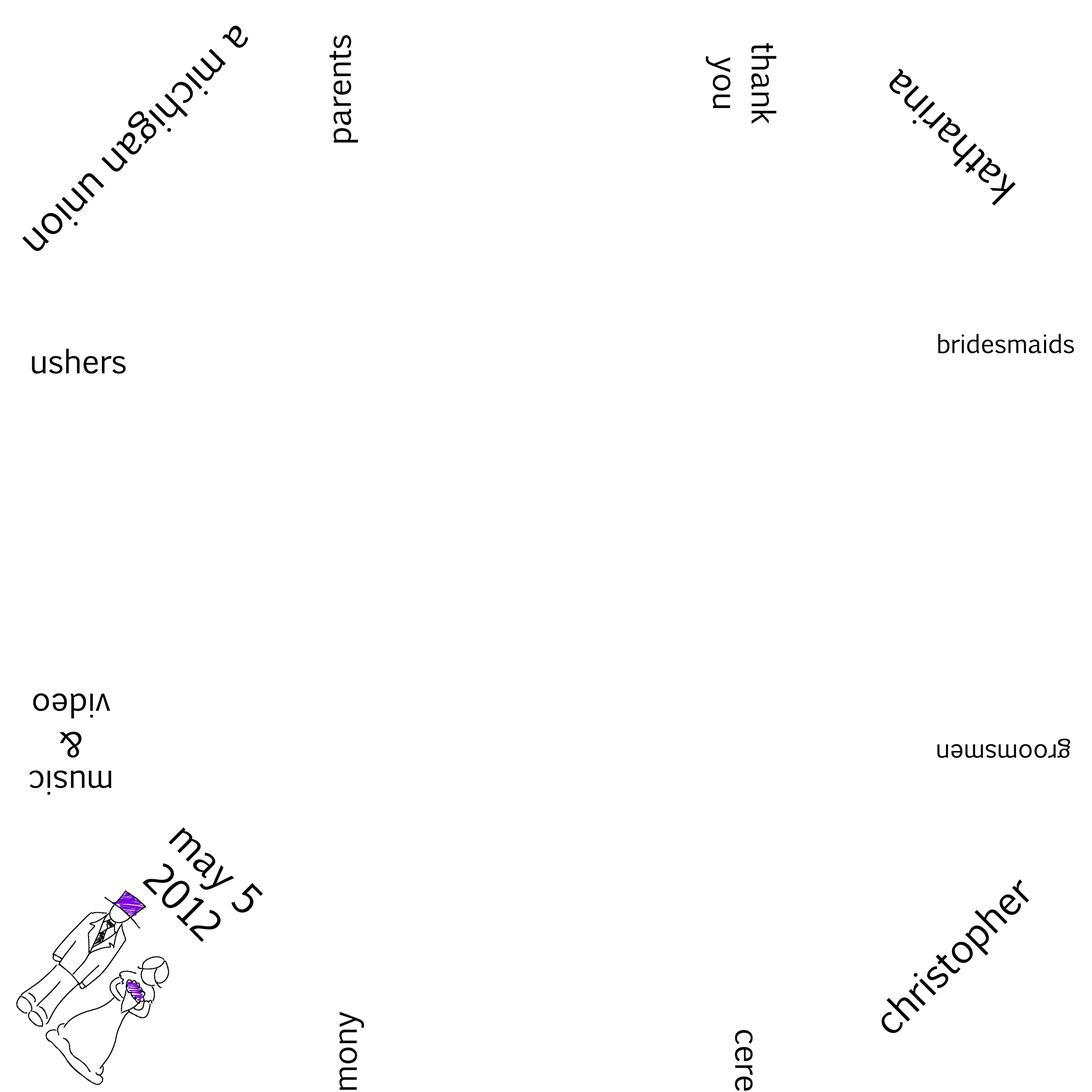
<style>
.page{position:relative;width:1092px;height:1092px;background:#ffffff}
.page>*{position:absolute;margin:0}
.t1{font:39.3px "EuphemiaCAS";color:#000000}
.t2{font:32.1px "EuphemiaCAS";color:#000000}
.t3{font:25px "EuphemiaCAS";color:#000000}
</style>
<div class="page">
<p class="t1" style="left:22px;top:26px;width:226px;height:225px;rotate:135deg">a michigan union</p>
<p class="t2" style="left:329px;top:35px;width:29px;height:108px;rotate:-90deg">parents</p>
<p class="t2" style="left:706px;top:43px;width:70px;height:81px;text-align:center;rotate:90deg">thank<br>you</p>
<p class="t1" style="left:889px;top:69px;width:127px;height:137px;rotate:-135deg">katharina</p>
<p class="t3" style="left:938px;top:334px;width:136px;height:19px">bridesmaids</p>
<p class="t2" style="left:32px;top:349px;width:94px;height:25px">ushers</p>
<p class="t2" style="left:29px;top:693px;width:82px;height:102px;text-align:center;rotate:180deg">music<br>&amp;<br>video</p>
<p class="t3" style="left:937px;top:739px;width:133px;height:19px;rotate:180deg">groomsmen</p>
<p class="t1" style="left:143px;top:827px;width:120px;height:115px;text-align:center;rotate:45deg">may 5<br>2012</p>
<p class="t1" style="left:881px;top:879px;width:148px;height:154px;rotate:-45deg">christopher</p>
<p class="t2" style="left:339px;top:1011px;width:25px;height:79px;rotate:-90deg">mony</p>
<p class="t2" style="left:735px;top:1030px;width:18px;height:61px;rotate:90deg">cere</p>
</div>
